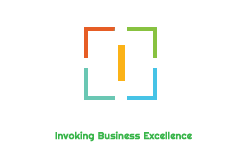
<style>
.page{position:relative;width:245px;height:160px;background:#ffffff}
.page>*{position:absolute;margin:0}
.t1{font:10px "Righteous-Regular";letter-spacing:-0.01em;color:#39b54a;font-weight:bold}
</style>
<div class="page">
<p class="t1" style="left:55px;top:131px;width:137px;height:11px">Invoking Business Excellence</p>
</div>
